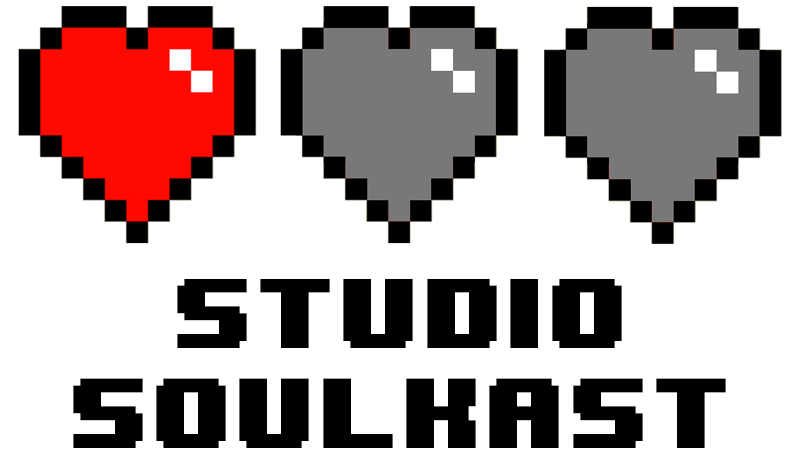
<style>
.page{position:relative;width:800px;height:462px;background:#ffffff}
.page>*{position:absolute;margin:0}
.t1{font:83.3px "8BITWONDERNominal";color:#000000}
</style>
<div class="page">
<p class="t1" style="left:73px;top:278px;width:653px;height:170px;text-align:center">STUDIO<br>SOULKAST</p>
</div>
